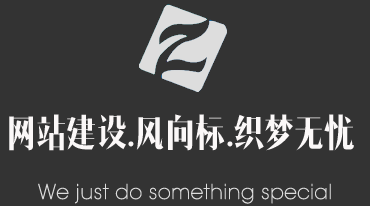
<style>
.page{position:relative;width:370px;height:206px;background:#333333}
.page>*{position:absolute;margin:0}
.t1{font:36px "MFLangSong_Noncommercial-Regular";color:#fbf8f8}
</style>
<div class="page">
<p class="t1" style="left:9px;top:114px;width:345px;height:37px">网站建设.风向标.织梦无忧</p>
</div>
